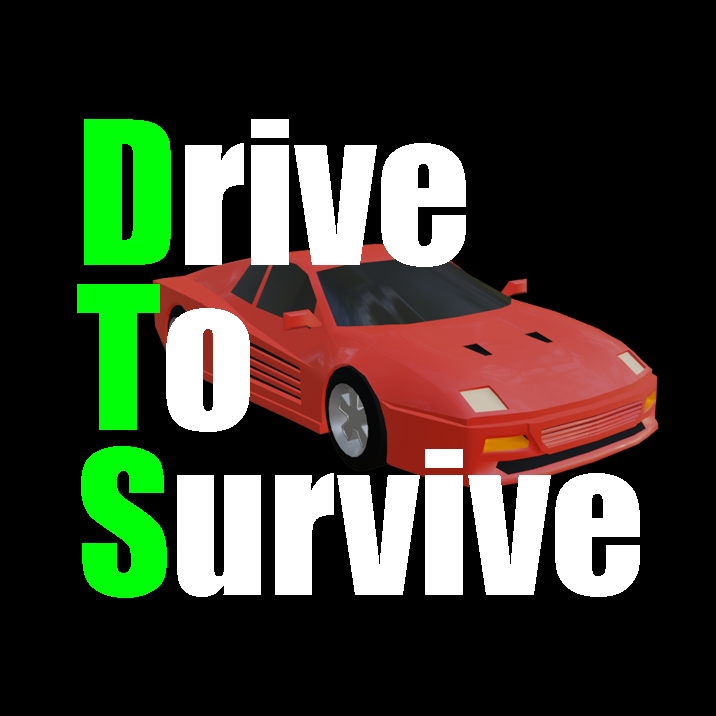
<style>
.page{position:relative;width:716px;height:716px;background:#000000}
.page>*{position:absolute;margin:0}
.t1{font:185px/165px "Impact";color:#ffffff}
.t2{font:185px/165px "Impact";color:#00ff08}
</style>
<div class="page">
<p class="t1" style="left:77px;top:119px;width:563px;height:479px"><span class="t2">D</span>rive<br><span class="t2">T</span>o<br><span class="t2">S</span>urvive</p>
</div>
